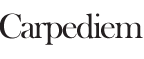
<style>
.page{position:relative;width:144px;height:59px;background:#ffffff}
.page>*{position:absolute;margin:0}
.t1{font:36px "BaskOldFace";letter-spacing:-0.05em;color:#231f20}
</style>
<div class="page">
<p class="t1" style="left:0px;top:13px;width:143px;height:32px">Carpediem</p>
</div>
